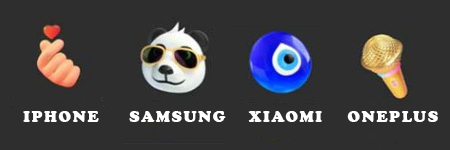
<style>
.page{position:relative;width:450px;height:150px;background:#2e2e2e}
.page>*{position:absolute;margin:0}
.t1{font:16px "CooperBlack";letter-spacing:0.1em;color:#ffffff;text-transform:uppercase}
</style>
<div class="page">
<p class="t1" style="left:23px;top:111px;width:415px;height:11px">Iphone Samsung    xiaomi   Oneplus</p>
</div>
